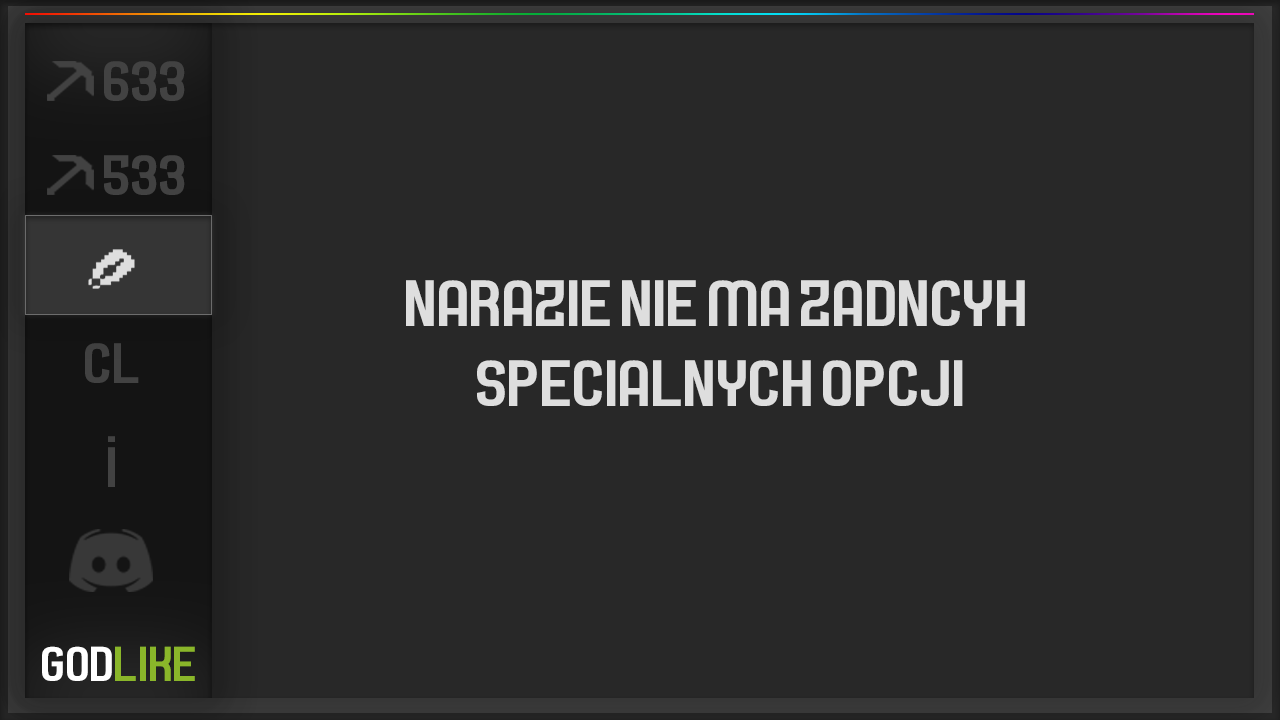
<style>
.page{position:relative;width:1280px;height:720px;background:#282828}
.page>*{position:absolute;margin:0}
.t1{font:58.3px "Septacharge";color:#424242}
.t2{font:66.7px "Septacharge";color:#dedede}
.t3{font:50px "Septacharge";color:#8ab62a}
.t4{font:50px "Septacharge";color:#ffffff}
</style>
<div class="page">
<p class="t1" style="left:104px;top:61px;width:81px;height:40px">633</p>
<p class="t1" style="left:104px;top:155px;width:81px;height:40px">533</p>
<p class="t2" style="left:406px;top:280px;width:619px;height:126px;text-align:center">NARAZIE NIE MA ZADNCYH<br> SPECIALNYCH OPCJI</p>
<p class="t1" style="left:85px;top:343px;width:54px;height:40px">CL</p>
<p class="t1" style="left:108px;top:436px;width:7px;height:6px">.</p>
<p class="t3" style="left:42px;top:646px;width:153px;height:35px"><span class="t4">GOD</span>LIKE</p>
</div>
